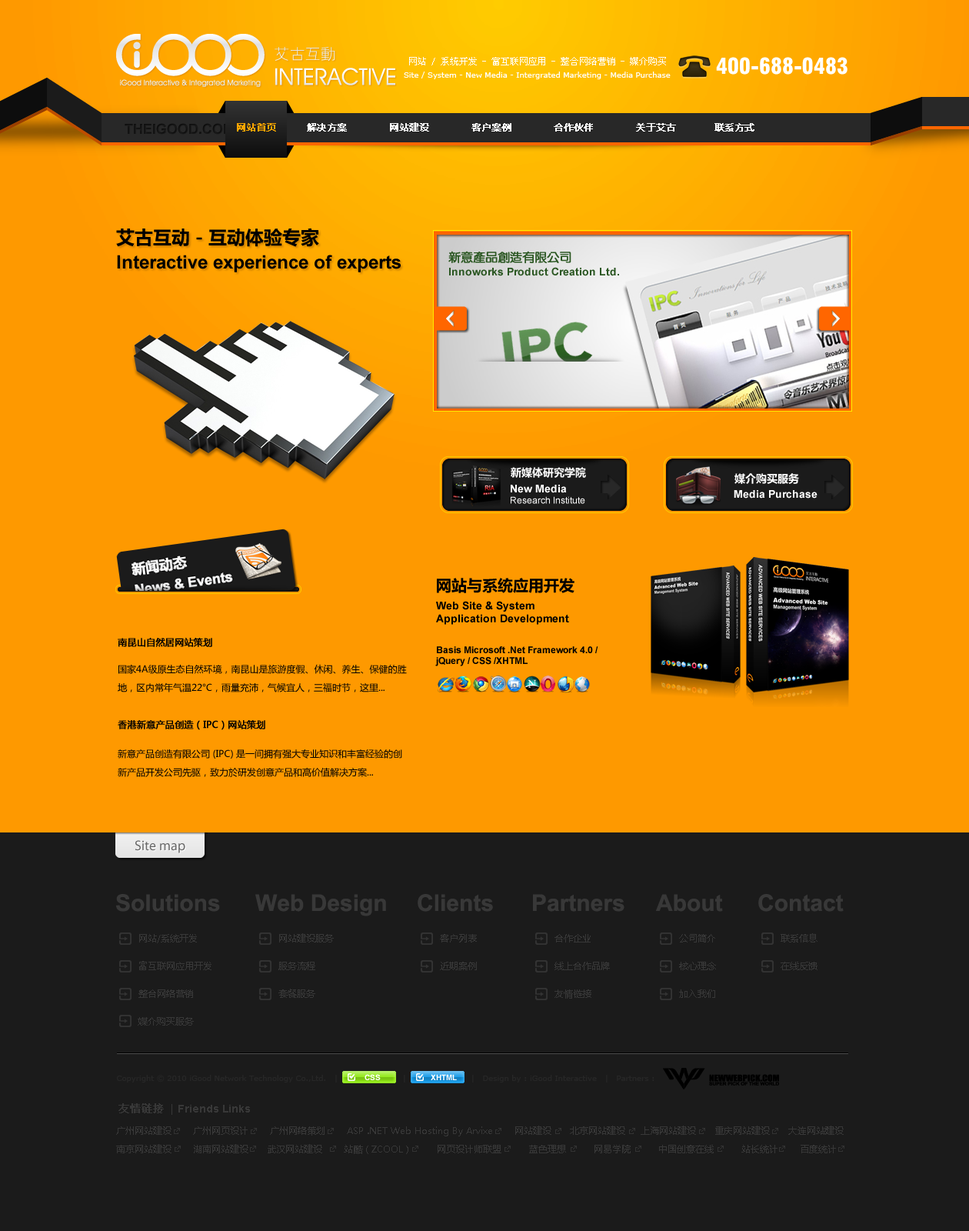
<style>
.page{position:relative;width:969px;height:1231px;background:#1b1b1b}
.page>*{position:absolute;margin:0}
.t1{font:9.2px "SimSun";color:#ffffff}
.t2{font:21.5px "Swiss721BT-BlackCondensed";color:#ffffff}
.t3{font:7.7px "Verdana";color:#ffffff}
.t4{font:9.2px "MicrosoftYaHei";color:#ffffff;font-weight:bold}
.t5{font:9.2px "MicrosoftYaHei";color:#fea500;font-weight:bold}
.t6{font:9.2px/18.5px "MicrosoftYaHei";color:#000000}
.t7{font:9.2px/10.8px "MicrosoftYaHei";color:#000000;font-weight:bold}
.t8{font:23.1px "Arial-BoldMT";color:#383838}
.t9{font:9.2px/27.7px "MicrosoftYaHei";color:#383838}
.t10{font:10.8px "SimSun";color:#383838;font-weight:bold}
.t11{font:10.8px "Verdana";color:#383838}
.t12{font:10.8px "Arial-BoldMT";color:#383838}
.t13{font:9.2px/18.5px "MicrosoftYaHei";color:#383838}
</style>
<div class="page">
<p class="t1" style="left:409px;top:57px;width:257px;height:8px">网站 / 系统开发 - 富互联网应用 - 整合网络营销 - 媒介购买</p>
<p class="t2" style="left:716px;top:57px;width:132px;height:18px">400-688-0483</p>
<p class="t3" style="left:404px;top:72px;width:267px;height:7px">Site / System - New Media - Intergrated Marketing - Media Purchase</p>
<p class="t4" style="left:237px;top:122px;width:517px;height:10px"><span class="t5">网站首页        </span>解决方案           网站建设           客户案例           合作伙伴           关于艾古          联系方式</p>
<p class="t6" style="left:118px;top:638px;width:289px;height:139px"><span class="t7">南昆山自然居网站策划<br><br></span>国家4A级原生态自然环境，南昆山是旅游度假、休闲、养生、保健的胜<br>地，区内常年气温22°C，雨量充沛，气候宜人，三福时节，这里... <br><br><span class="t7">香港新意产品创造（IPC）网站策划<br><br></span>新意产品创造有限公司 (IPC) 是一间拥有强大专业知识和丰富经验的创<br>新产品开发公司先驱，致力於研发创意产品和高价值解决方案...</p>
<p class="t8" style="left:116px;top:894px;width:104px;height:17px">Solutions</p>
<p class="t8" style="left:255px;top:894px;width:131px;height:22px">Web Design</p>
<p class="t8" style="left:418px;top:894px;width:75px;height:17px">Clients</p>
<p class="t8" style="left:533px;top:894px;width:91px;height:17px">Partners</p>
<p class="t8" style="left:656px;top:894px;width:67px;height:17px">About</p>
<p class="t8" style="left:758px;top:894px;width:86px;height:17px">Contact</p>
<p class="t9" style="left:138px;top:934px;width:73px;height:91px">网站/系统开发 <br>富互联网应用开发 <br>整合网络营销 <br>媒介购买服务</p>
<p class="t9" style="left:278px;top:933px;width:56px;height:64px">网站建设服务 <br>服务流程 <br>套餐服务</p>
<p class="t9" style="left:440px;top:934px;width:37px;height:36px">客户列表 <br>近期案例</p>
<p class="t9" style="left:555px;top:934px;width:55px;height:64px">合作企业 <br>线上合作品牌 <br>友情链接</p>
<p class="t9" style="left:679px;top:934px;width:37px;height:63px">公司简介 <br>核心理念 <br>加入我们</p>
<p class="t9" style="left:781px;top:933px;width:37px;height:37px">联系信息 <br>在线反馈</p>
<p class="t10" style="left:118px;top:1103px;width:54px;height:11px">友情链接 <span class="t11">|</span></p>
<p class="t12" style="left:178px;top:1104px;width:72px;height:8px">Friends Links</p>
<p class="t13" style="left:116px;top:1125px;width:728px;height:29px">广州网站建设       广州网页设计       广州网络策划       ASP .NET Web Hosting By Arvixe       网站建设      北京网站建设     上海网站建设      重庆网站建设      大连网站建设 <br>南京网站建设       湖南网站建设      武汉网站建设       站酷（ZCOOL）        网页设计师联盟         蓝色理想         网易学院         中国创意在线         站长统计       百度统计</p>
</div>
